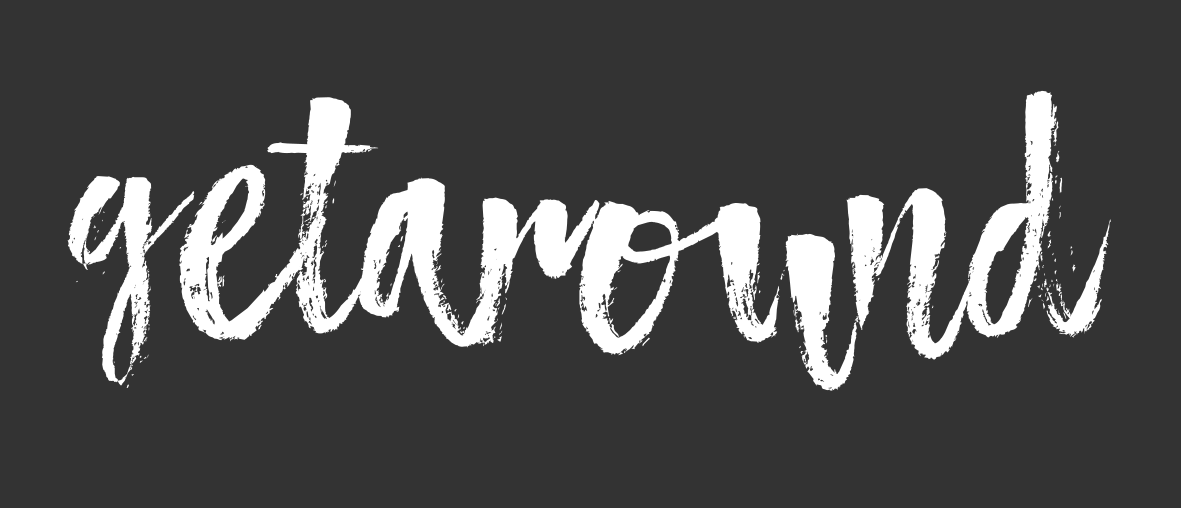
<style>
.page{position:relative;width:1181px;height:508px;background:#333333}
.page>*{position:absolute;margin:0}
.t1{font:303.1px "AtmosphereScriptTypeface";color:#fefefe}
</style>
<div class="page">
<p class="t1" style="left:67px;top:90px;width:1044px;height:301px">getaround</p>
</div>
